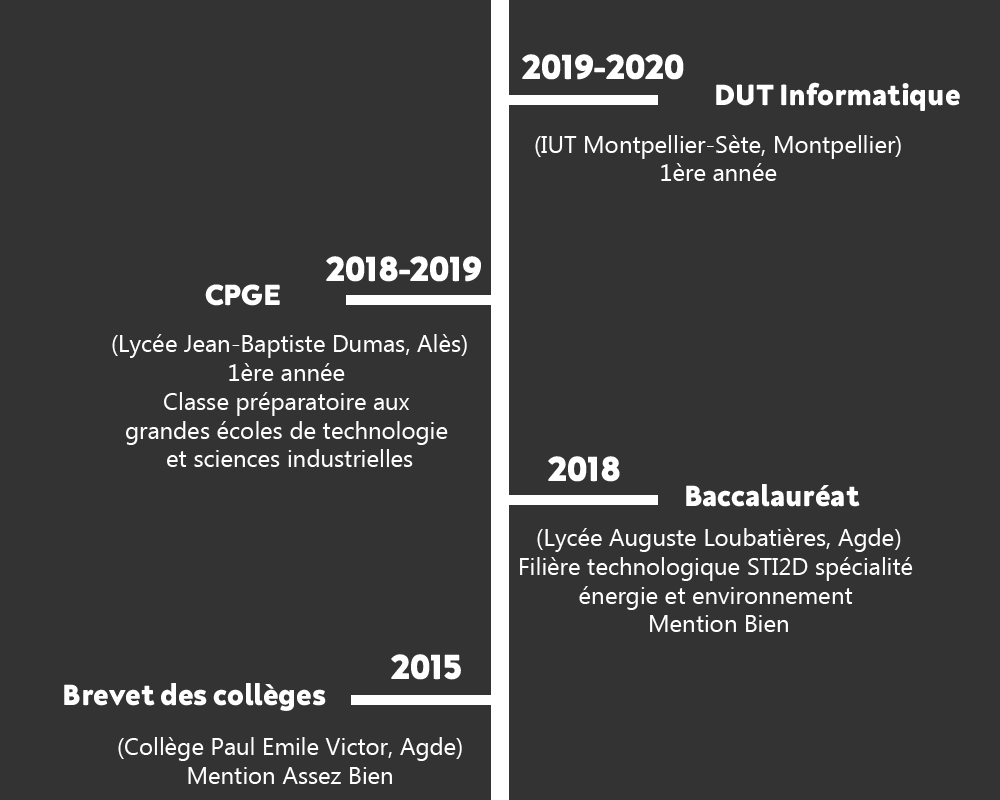
<style>
.page{position:relative;width:1000px;height:800px;background:#333333}
.page>*{position:absolute;margin:0}
.t1{font:36px "Neufreit-ExtraBold";color:#ffffff}
.t2{font:30px "Neufreit-ExtraBold";color:#ffffff}
.t3{font:24px "MicrosoftNewTaiLue";color:#ffffff}
</style>
<div class="page">
<p class="t1" style="left:522px;top:54px;width:162px;height:26px">2019-2020</p>
<p class="t2" style="left:716px;top:82px;width:244px;height:29px">DUT Informatique</p>
<p class="t3" style="left:535px;top:135px;width:366px;height:46px;text-align:center">(IUT Montpellier-Sète, Montpellier)<br>1ère année</p>
<p class="t1" style="left:326px;top:256px;width:155px;height:26px">2018-2019</p>
<p class="t2" style="left:205px;top:284px;width:75px;height:22px">CPGE</p>
<p class="t3" style="left:112px;top:334px;width:355px;height:133px;text-align:center">(Lycée Jean-Baptiste Dumas, Alès)<br>1ère année <br>Classe préparatoire aux <br>grandes écoles de technologie <br>et sciences industrielles</p>
<p class="t1" style="left:548px;top:456px;width:72px;height:26px">2018</p>
<p class="t2" style="left:686px;top:484px;width:174px;height:23px">Baccalauréat</p>
<p class="t3" style="left:520px;top:528px;width:393px;height:104px;text-align:center">(Lycée Auguste Loubatières, Agde)<br>Filière technologique STI2D spécialité <br>énergie et environnement <br>Mention Bien</p>
<p class="t1" style="left:391px;top:654px;width:70px;height:26px">2015</p>
<p class="t2" style="left:64px;top:683px;width:262px;height:28px">Brevet des collèges</p>
<p class="t3" style="left:118px;top:737px;width:344px;height:47px;text-align:center">(Collège Paul Emile Victor, Agde)<br>Mention Assez Bien</p>
</div>
